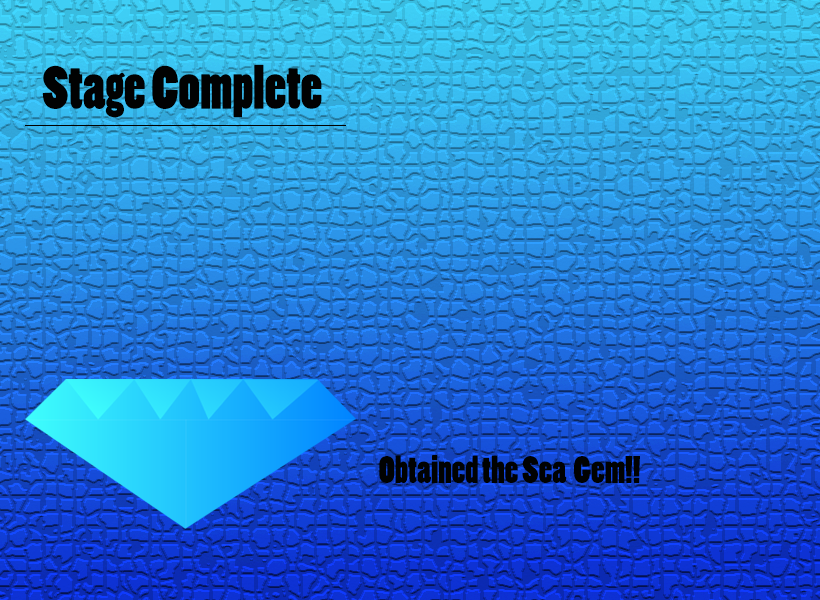
<style>
.page{position:relative;width:820px;height:600px}
.page>*{position:absolute;margin:0}
.t1{font:57.4px "PoplarStd";color:#010202}
.t2{font:36px "PoplarStd";color:#010202}
</style>
<div class="page">
<p class="t1" style="left:42px;top:64px;width:280px;height:54px">Stage Complete</p>
<p class="t2" style="left:379px;top:455px;width:261px;height:28px">Obtained the Sea  Gem!!</p>
</div>
